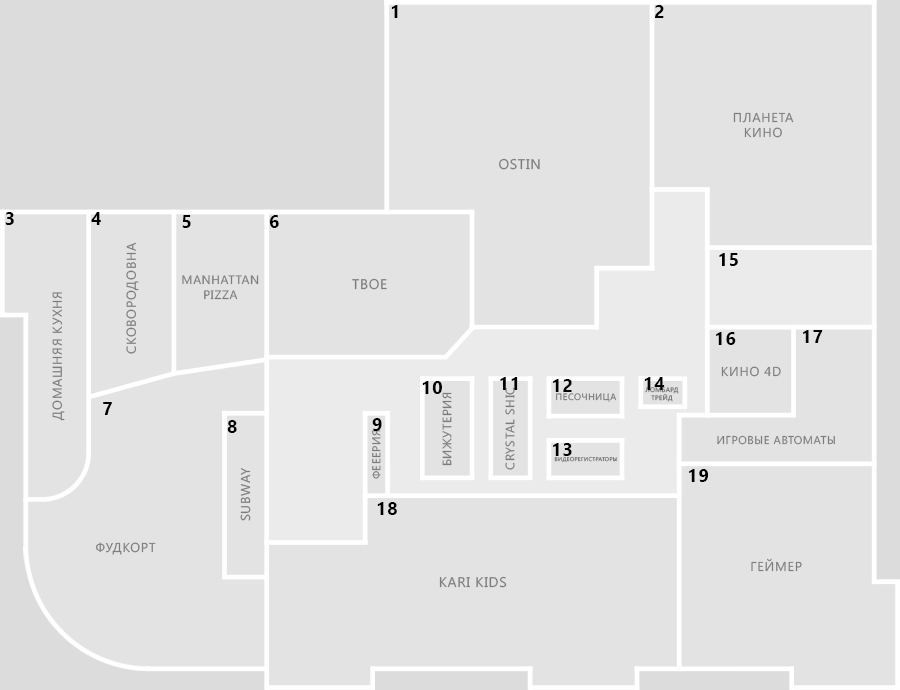
<style>
.page{position:relative;width:900px;height:690px;background:#e3e3e3}
.page>*{position:absolute;margin:0}
.t1{font:18px "SegoeUI-Bold";letter-spacing:0.05em;color:#000000;text-transform:uppercase}
.t2{font:13.1px "SegoeUI";letter-spacing:0.05em;color:#7c7c7c;text-transform:uppercase}
.t3{font:14px "SegoeUI";letter-spacing:0.05em;color:#7c7c7c;text-transform:uppercase}
.t4{font:12.2px "SegoeUI";letter-spacing:0.05em;color:#7c7c7c;text-transform:uppercase}
.t5{font:6.6px "SegoeUI";letter-spacing:0.05em;color:#7c7c7c;text-transform:uppercase}
.t6{font:9.4px "SegoeUI";letter-spacing:0.05em;color:#7c7c7c;text-transform:uppercase}
.t7{font:11.2px "SegoeUI";letter-spacing:0.05em;color:#7c7c7c;text-transform:uppercase}
.t8{font:5.6px "SegoeUI";letter-spacing:0.05em;color:#7c7c7c;text-transform:uppercase}
</style>
<div class="page">
<p class="t1" style="left:391px;top:5px;width:7px;height:13px">1</p>
<p class="t1" style="left:655px;top:5px;width:9px;height:13px">2</p>
<p class="t2" style="left:733px;top:112px;width:61px;height:26px;text-align:center">Планета<br>кино</p>
<p class="t3" style="left:499px;top:158px;width:41px;height:12px">Ostin</p>
<p class="t1" style="left:5px;top:212px;width:9px;height:13px">3</p>
<p class="t1" style="left:91px;top:212px;width:10px;height:13px">4</p>
<p class="t1" style="left:182px;top:215px;width:9px;height:13px">5</p>
<p class="t1" style="left:269px;top:215px;width:10px;height:13px">6</p>
<p class="t2" style="left:126px;top:242px;width:13px;height:112px;rotate:-90deg">Сковородовна</p>
<p class="t1" style="left:719px;top:253px;width:19px;height:13px">15</p>
<p class="t4" style="left:182px;top:275px;width:77px;height:25px;text-align:center">Manhattan<br>pizza</p>
<p class="t3" style="left:352px;top:278px;width:35px;height:12px">твое</p>
<p class="t2" style="left:52px;top:292px;width:13px;height:129px;rotate:-90deg">Домашняя кухня</p>
<p class="t1" style="left:716px;top:332px;width:20px;height:13px">16</p>
<p class="t1" style="left:803px;top:330px;width:20px;height:13px">17</p>
<p class="t2" style="left:721px;top:366px;width:60px;height:11px">Кино 4D</p>
<p class="t1" style="left:500px;top:377px;width:18px;height:13px">11</p>
<p class="t1" style="left:644px;top:377px;width:21px;height:13px">14</p>
<p class="t1" style="left:422px;top:381px;width:20px;height:13px">10</p>
<p class="t4" style="left:505px;top:387px;width:10px;height:83px;rotate:-90deg">CRYSTAL SHIC</p>
<p class="t1" style="left:553px;top:379px;width:19px;height:13px">12</p>
<p class="t5" style="left:645px;top:387px;width:34px;height:15px;text-align:center">Ломбард<br>ТРЕЙД</p>
<p class="t4" style="left:442px;top:392px;width:10px;height:74px;rotate:-90deg">Бижутерия</p>
<p class="t6" style="left:556px;top:393px;width:61px;height:9px">Песочница</p>
<p class="t1" style="left:103px;top:402px;width:9px;height:13px">7</p>
<p class="t1" style="left:227px;top:420px;width:10px;height:13px">8</p>
<p class="t1" style="left:372px;top:418px;width:10px;height:13px">9</p>
<p class="t7" style="left:372px;top:430px;width:9px;height:49px;rotate:-90deg">Фееерия</p>
<p class="t7" style="left:717px;top:435px;width:118px;height:10px">Игровые автоматы</p>
<p class="t1" style="left:553px;top:443px;width:19px;height:13px">13</p>
<p class="t8" style="left:554px;top:456px;width:63px;height:7px">Видеорегистраторы</p>
<p class="t2" style="left:240px;top:468px;width:11px;height:53px;rotate:-90deg">Subway</p>
<p class="t1" style="left:689px;top:469px;width:20px;height:13px">19</p>
<p class="t1" style="left:377px;top:502px;width:20px;height:13px">18</p>
<p class="t2" style="left:95px;top:542px;width:61px;height:13px">Фудкорт</p>
<p class="t2" style="left:751px;top:558px;width:51px;height:14px">Геймер</p>
<p class="t3" style="left:439px;top:576px;width:68px;height:12px">Kari kids</p>
</div>
